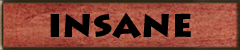
<style>
.page{position:relative;width:240px;height:50px}
.page>*{position:absolute;margin:0}
.t1{font:38px "LithosPro-Black";color:#000000}
</style>
<div class="page">
<p class="t1" style="left:50px;top:13px;width:141px;height:26px">insane</p>
</div>
